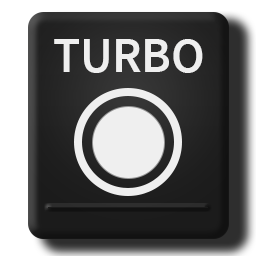
<style>
.page{position:relative;width:256px;height:256px}
.page>*{position:absolute;margin:0}
.t1{font:50px "SourceSansPro-SemiBold";letter-spacing:-0.01em;color:#efefef}
</style>
<div class="page">
<p class="t1" style="left:54px;top:39px;width:149px;height:34px">TURBO</p>
</div>
